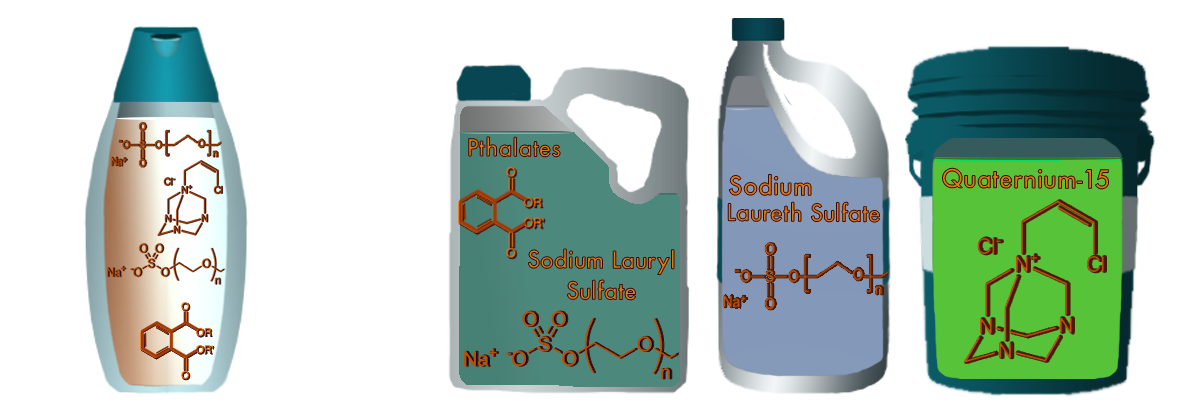
<style>
.page{position:relative;width:1200px;height:420px;background:#ffffff}
.page>*{position:absolute;margin:0}
.t1{font:22.9px "Futura-Medium"}
.t2{font:25px "Futura-Medium"}
</style>
<div class="page">
<p class="t1" style="left:468px;top:137px;width:92px;height:20px">Pthalates</p>
<p class="t2" style="left:729px;top:174px;width:82px;height:22px">Sodium</p>
<p class="t2" style="left:942px;top:168px;width:167px;height:21px">Quaternium-15</p>
<p class="t1" style="left:728px;top:202px;width:152px;height:20px">Laureth Sulfate</p>
<p class="t1" style="left:528px;top:249px;width:146px;height:26px">Sodium Lauryl</p>
<p class="t1" style="left:567px;top:280px;width:69px;height:20px">Sulfate</p>
</div>
